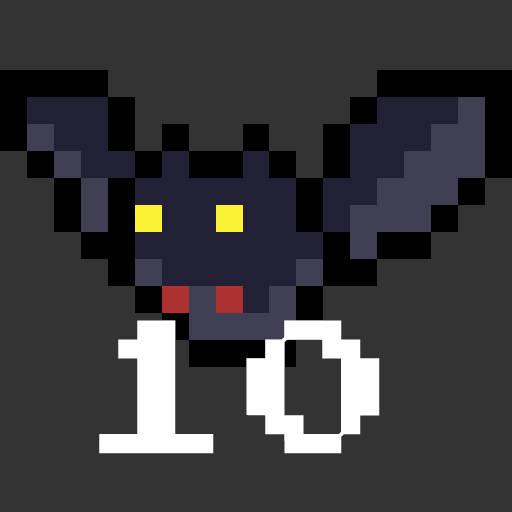
<style>
.page{position:relative;width:512px;height:512px;background:#333333}
.page>*{position:absolute;margin:0}
.t1{font:193.9px "PixelEmulator";letter-spacing:0.075em;color:#ffffff;font-variant:small-caps}
</style>
<div class="page">
<p class="t1" style="left:99px;top:320px;width:281px;height:134px">10</p>
</div>
